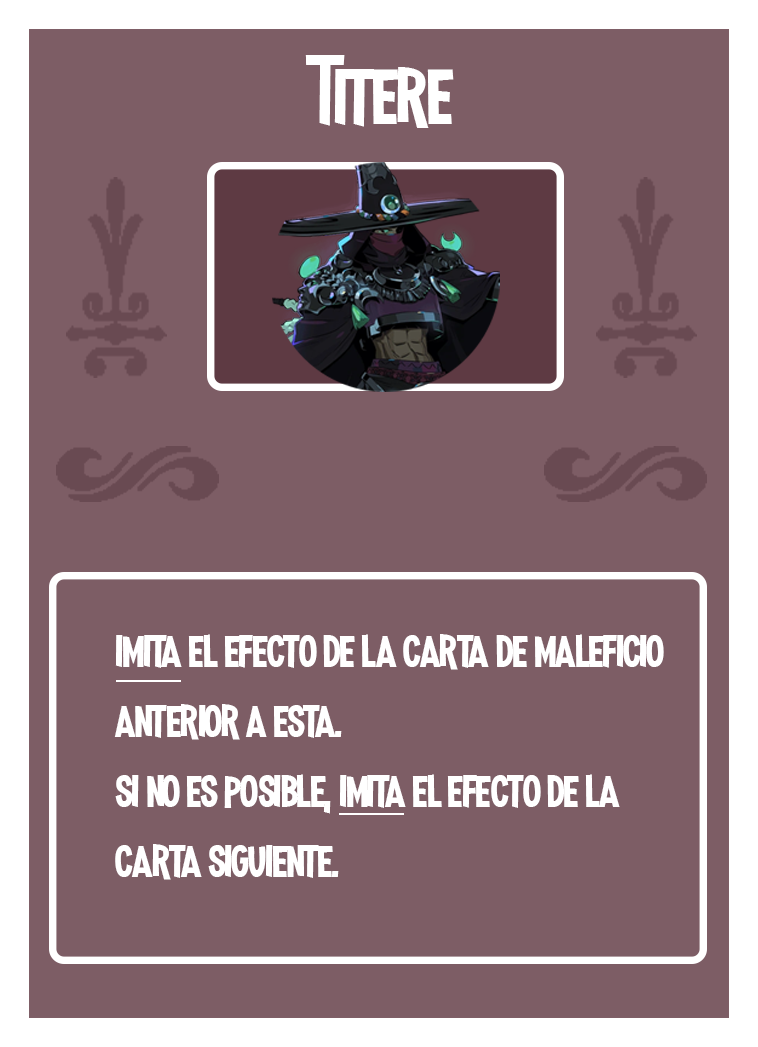
<style>
.page{position:relative;width:758px;height:1047px;background:#7d5d65}
.page>*{position:absolute;margin:0}
.t1{font:100px "MadnessHyperactive";color:#ffffff}
.t2{font:58.3px "MadnessHyperactive";color:#ffffff}
</style>
<div class="page">
<p class="t1" style="left:305px;top:55px;width:149px;height:73px">Titere</p>
<p class="t2" style="left:114px;top:634px;width:550px;height:246px">imita el efecto de la carta de maleficio anterior a esta. <br>si no es posible, imita el efecto de la carta siguiente.</p>
</div>
